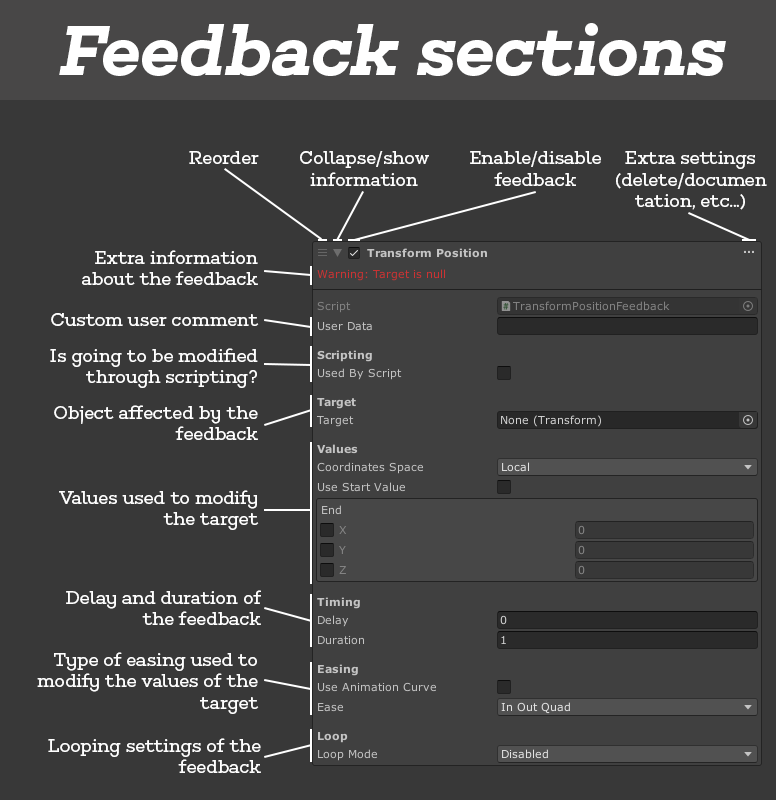
<style>
.page{position:relative;width:776px;height:800px;background:#383838}
.page>*{position:absolute;margin:0}
.t1{font:72px "Choplin-SemiBoldItalic";color:#ffffff}
.t2{font:18px "Choplin-Book";color:#ffffff}
</style>
<div class="page">
<p class="t1" style="left:59px;top:23px;width:667px;height:53px">Feedback sections</p>
<p class="t2" style="left:189px;top:151px;width:70px;height:13px">Reorder</p>
<p class="t2" style="left:300px;top:151px;width:129px;height:35px;text-align:center">Collapse/show <br>information</p>
<p class="t2" style="left:470px;top:151px;width:131px;height:35px;text-align:center">Enable/disable <br>feedback</p>
<p class="t2" style="left:616px;top:151px;width:151px;height:59px;text-align:center">Extra settings (delete/documentation, etc...)</p>
<p class="t2" style="left:82px;top:250px;width:176px;height:35px;text-align:right">Extra information about the feedback</p>
<p class="t2" style="left:51px;top:313px;width:208px;height:13px">Custom user comment</p>
<p class="t2" style="left:50px;top:348px;width:208px;height:40px;text-align:right">Is going to be modified through scripting?</p>
<p class="t2" style="left:54px;top:405px;width:204px;height:35px;text-align:right">Object affected by the feedback</p>
<p class="t2" style="left:59px;top:490px;width:200px;height:40px;text-align:right">Values used to modify the target</p>
<p class="t2" style="left:66px;top:590px;width:195px;height:35px;text-align:right">Delay and duration of the feedback</p>
<p class="t2" style="left:37px;top:652px;width:222px;height:62px;text-align:right">Type of easing used to modify the values of the target</p>
<p class="t2" style="left:48px;top:738px;width:213px;height:35px;text-align:right">Looping settings of the feedback</p>
</div>
